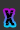
<style>
.page{position:relative;width:20px;height:30px;background:#333333}
.page>*{position:absolute;margin:0}
.t1{font:20px "BadSignal";color:#000000}
</style>
<div class="page">
<p class="t1" style="left:4px;top:10px;width:11px;height:16px">x</p>
</div>
